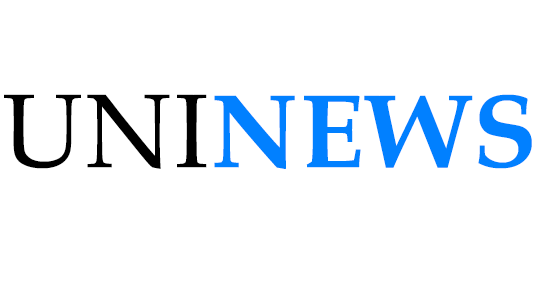
<style>
.page{position:relative;width:540px;height:281px;background:#ffffff}
.page>*{position:absolute;margin:0}
.t1{font:104.4px "BookAntiqua-Bold";letter-spacing:0.02em;color:#0180ff}
.t2{font:104.4px "BookAntiqua";letter-spacing:0.02em;color:#000000}
</style>
<div class="page">
<p class="t1" style="left:4px;top:94px;width:528px;height:75px"><span class="t2">UNI</span>NEWS</p>
</div>
